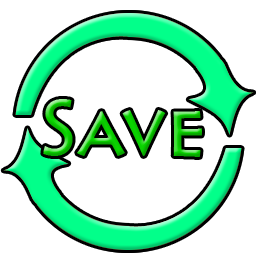
<style>
.page{position:relative;width:256px;height:256px;background:#ffffff}
.page>*{position:absolute;margin:0}
.t1{font:74px "Pericles"}
</style>
<div class="page">
<p class="t1" style="left:43px;top:99px;width:159px;height:58px">Save</p>
</div>
